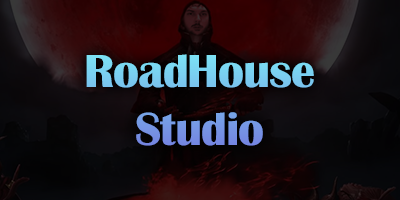
<style>
.page{position:relative;width:400px;height:200px}
.page>*{position:absolute;margin:0}
.t1{font:48px "BritannicBold";letter-spacing:-0.02em}
</style>
<div class="page">
<p class="t1" style="left:86px;top:54px;width:228px;height:92px;text-align:center">RoadHouse<br>Studio</p>
</div>
